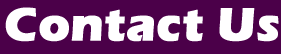
<style>
.page{position:relative;width:281px;height:54px;background:#4b0049}
.page>*{position:absolute;margin:0}
.t1{font:48px "ErasITC-Bold";color:#ffffff;font-weight:bold}
</style>
<div class="page">
<p class="t1" style="left:5px;top:7px;width:274px;height:35px">Contact Us</p>
</div>
